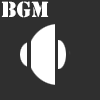
<style>
.page{position:relative;width:100px;height:100px;background:#2f2f2f}
.page>*{position:absolute;margin:0}
.t1{font:20.4px "StencilStd";color:#ffffff}
</style>
<div class="page">
<p class="t1" style="left:1px;top:1px;width:48px;height:17px">bgm</p>
</div>
